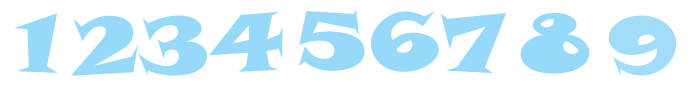
<style>
.page{position:relative;width:688px;height:100px;background:#ffffff}
.page>*{position:absolute;margin:0}
.t1{font:80.5px "SnapITC-Regular";color:#97d9f8;scale:1.06 1}
</style>
<div class="page">
<p class="t1" style="left:14px;top:13px;width:44px;height:60px">1</p>
<p class="t1" style="left:71px;top:15px;width:67px;height:61px">2</p>
<p class="t1" style="left:138px;top:15px;width:69px;height:61px">3</p>
<p class="t1" style="left:209px;top:12px;width:74px;height:60px">4</p>
<p class="t1" style="left:299px;top:10px;width:66px;height:61px">5</p>
<p class="t1" style="left:371px;top:11px;width:68px;height:61px">6</p>
<p class="t1" style="left:440px;top:13px;width:67px;height:60px">7</p>
<p class="t1" style="left:520px;top:13px;width:70px;height:61px">8</p>
<p class="t1" style="left:608px;top:15px;width:69px;height:61px;opacity:0.9">9</p>
</div>
